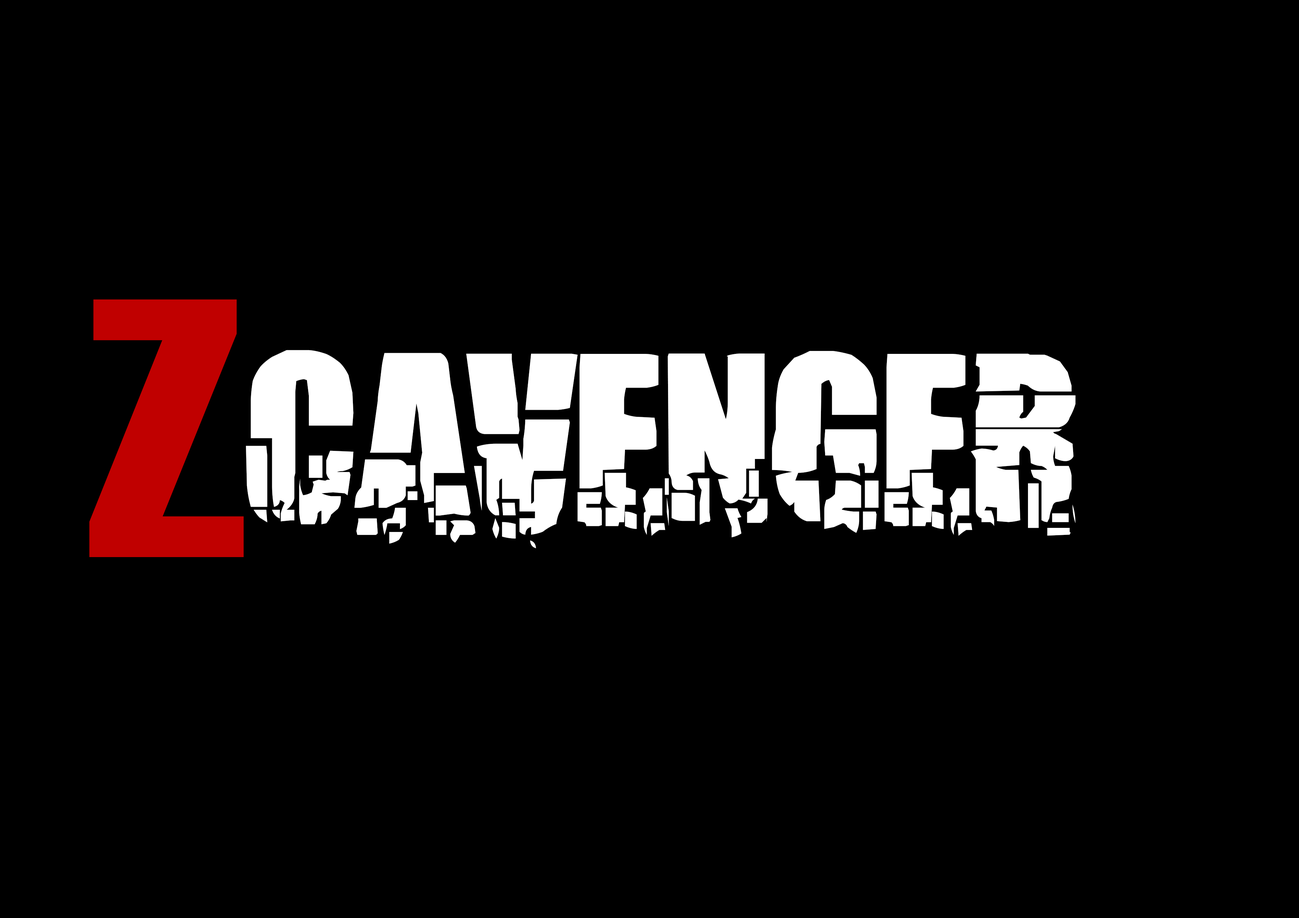
<style>
.page{position:relative;width:1299px;height:918px;background:#000000}
.page>*{position:absolute;margin:0}
.t1{font:454.4px "Haettenschweiler";color:#c00000}
.t2{font:247.6px "Breakaway";color:#ffffff}
</style>
<div class="page">
<p class="t1" style="left:89px;top:300px;width:155px;height:257px">z</p>
<p class="t2" style="left:246px;top:350px;width:829px;height:198px">cavenger</p>
</div>
